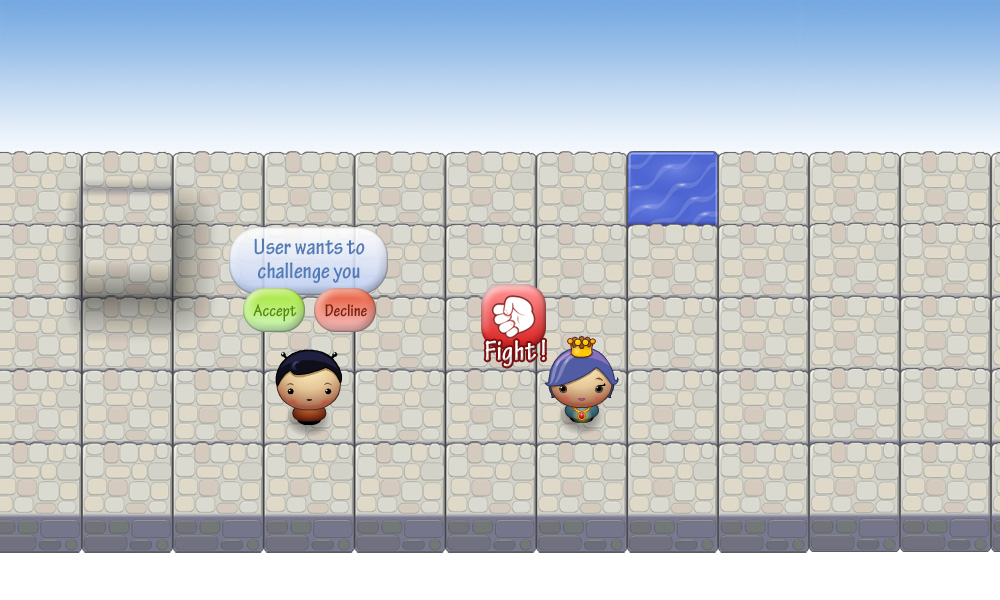
<style>
.page{position:relative;width:1000px;height:600px}
.page>*{position:absolute;margin:0}
.t1{font:24px/24px "TektonPro-BoldCond";color:#547bb6}
.t2{font:18px "TektonPro-BoldCond";color:#598a12}
.t3{font:18px "TektonPro-BoldCond";color:#742010}
.t4{font:30px "TektonPro-BoldCond";color:#fffefe}
</style>
<div class="page">
<p class="t1" style="left:254px;top:238px;width:111px;height:45px;text-align:center">User wants to challenge you</p>
<p class="t2" style="left:253px;top:304px;width:44px;height:18px">Accept</p>
<p class="t3" style="left:325px;top:304px;width:42px;height:13px">Decline</p>
<p class="t4" style="left:485px;top:339px;width:60px;height:28px">Fight !</p>
</div>
